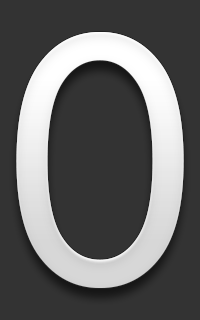
<style>
.page{position:relative;width:200px;height:320px;background:#333333}
.page>*{position:absolute;margin:0}
.t1{font:344.1px "Prelude-Medium";color:#e9e9e9}
</style>
<div class="page">
<p class="t1" style="left:16px;top:32px;width:168px;height:256px">0</p>
<p class="t1" style="left:16px;top:32px;width:168px;height:256px">0</p>
</div>
